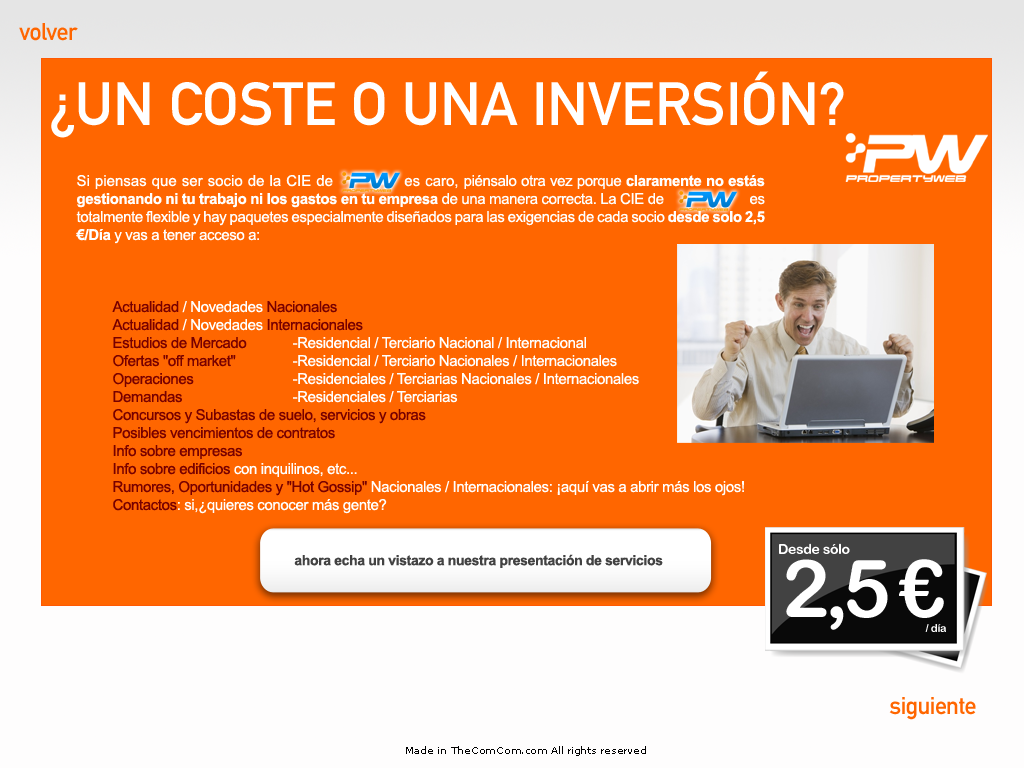
<style>
.page{position:relative;width:1024px;height:768px;background:#ff6600}
.page>*{position:absolute;margin:0}
.t1{font:24px "DINMittelschriftStd";letter-spacing:-0.025em;color:#ff6600}
.t2{font:60px "DINMittelschriftStd";color:#ffffff}
.t3{font:15px "ArialMT";letter-spacing:-0.025em;color:#ffffff}
.t4{font:15px "ArialMT";color:#ffffff}
.t5{font:15px "Arial-BoldMT";letter-spacing:-0.025em;color:#ffffff}
.t6{font:15px "ArialMT";letter-spacing:-0.025em;color:#770000}
.t7{font:14px "ArialRoundedMTBold";letter-spacing:-0.025em;color:#ffffff}
.t8{font:14px "Arial-BoldMT";letter-spacing:-0.025em;color:#424242}
.t9{font:80px "ArialRoundedMTBold";letter-spacing:-0.075em;color:#ffffff}
.t10{font:11px "ArialRoundedMTBold";letter-spacing:-0.025em;color:#ffffff}
.t11{font:10px "MSReferenceSansSerif";letter-spacing:-0.025em;color:#010101}
</style>
<div class="page">
<p class="t1" style="left:19px;top:23px;width:59px;height:18px">volver</p>
<p class="t2" style="left:51px;top:71px;width:793px;height:67px">¿UN COSTE O UNA INVERSIÓN?</p>
<p class="t3" style="left:76px;top:175px;width:689px;height:339px;text-align:justify"><span class="t4">Si piensas que ser socio de la CIE de              es caro, </span>piénsalo otra vez porque <span class="t5">claramente no estás gestionando ni tu trabajo ni los gastos en tu empresa</span> de una manera correcta. La CIE de                   es totalmente flexible y hay paquetes especialmente diseñados para las exigencias de cada socio <span class="t5">desde solo 2,5 €/Día</span> y vas a tener acceso a:<br><br> <br><br> <span class="t6">Actualidad</span> / Novedades <span class="t6">Nacionales <br> Actualidad</span> / Novedades <span class="t6">Internacionales <br> Estudios de Mercado</span>   -Residencial / Terciario Nacional / Internacional<br> <span class="t6">Ofertas "off market"  </span>   -Residencial / Terciario Nacionales / Internacionales<br> <span class="t6">Operaciones </span>         -Residenciales / Terciarias Nacionales / Internacionales <br> <span class="t6">Demandas </span>         -Residenciales / Terciarias<br> <span class="t6">Concursos y Subastas de suelo, servicios y obras<br> Posibles vencimientos de contratos<br> Info sobre empresas <br> Info sobre edificios</span> con inquilinos, etc...<br> <span class="t6">Rumores, Oportunidades y "Hot Gossip"</span> Nacionales / Internacionales: ¡aquí vas a abrir más los ojos!<br> <span class="t6">Contactos</span>: si,¿quieres conocer más gente?</p>
<p class="t7" style="left:779px;top:543px;width:71px;height:11px">Desde sólo</p>
<p class="t8" style="left:294px;top:554px;width:369px;height:14px">ahora echa un vistazo a nuestra presentación de servicios</p>
<p class="t9" style="left:786px;top:559px;width:158px;height:71px">2,5 €</p>
<p class="t10" style="left:925px;top:624px;width:21px;height:8px">/ día</p>
<p class="t1" style="left:889px;top:697px;width:87px;height:23px">siguiente</p>
<p class="t11" style="left:406px;top:746px;width:240px;height:10px">Made in TheComCom.com All rights reserved</p>
</div>
